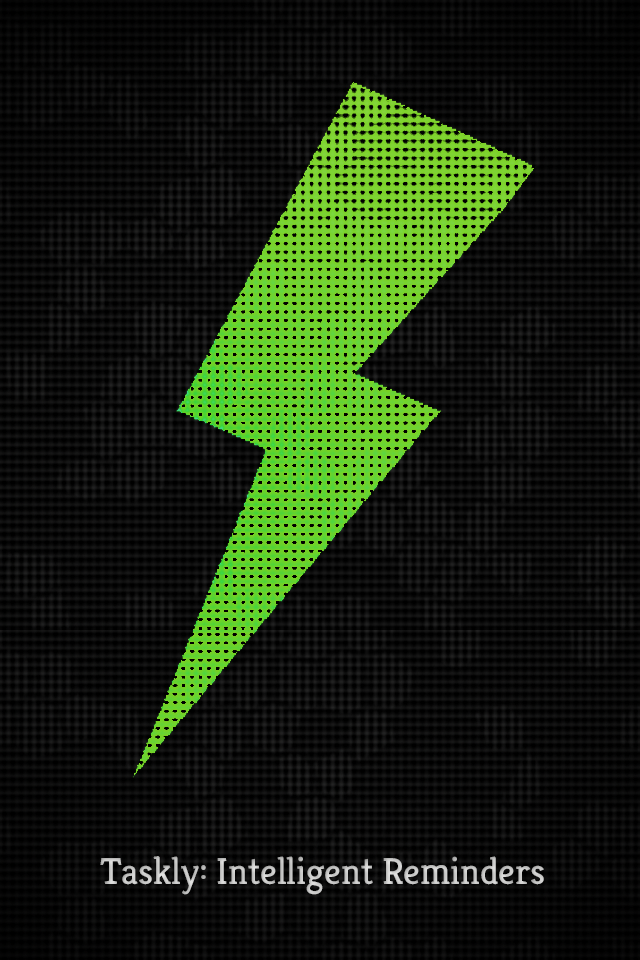
<style>
.page{position:relative;width:640px;height:960px}
.page>*{position:absolute;margin:0}
.t1{font:37.5px "Kreon";color:#c9c9c8}
</style>
<div class="page">
<p class="t1" style="left:100px;top:856px;width:444px;height:39px">Taskly: Intelligent Reminders</p>
</div>
